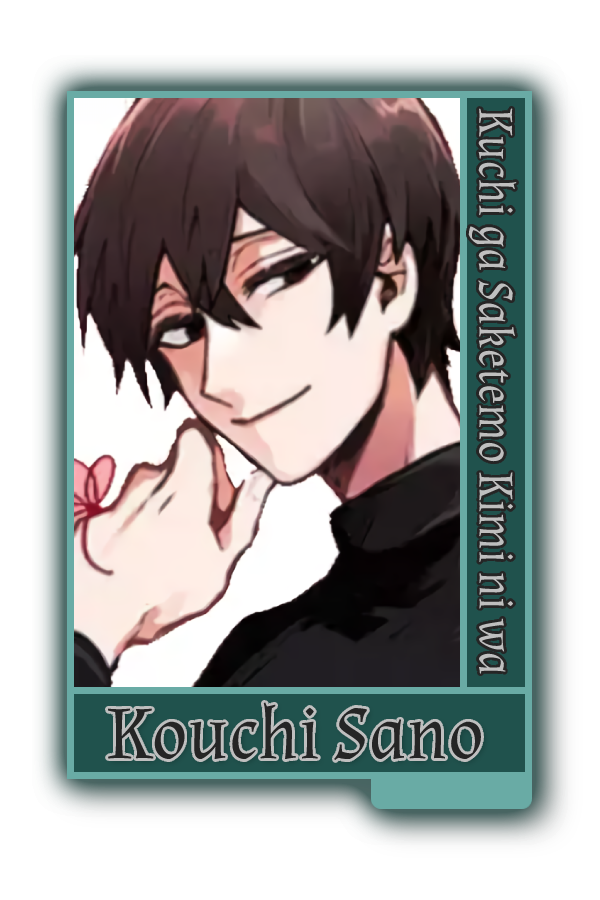
<style>
.page{position:relative;width:600px;height:900px;background:#ffffff}
.page>*{position:absolute;margin:0}
.t1{font:49.8px "Almendra-Regular";color:#bfbfbf;scale:0.92 1}
.t2{font:75px "Almendra-Regular";color:#252525}
</style>
<div class="page">
<p class="t1" style="left:468px;top:108px;width:49px;height:566px;rotate:90deg">Kuchi ga Saketemo Kimi ni wa</p>
<p class="t2" style="left:107px;top:702px;width:374px;height:59px">Kouchi Sano</p>
</div>
